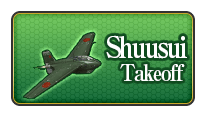
<style>
.page{position:relative;width:206px;height:117px;background:#ffffff}
.page>*{position:absolute;margin:0}
.t1{font:30px/30px "RyuminPro-ExBold";letter-spacing:-0.1em;color:#ffffff;scale:0.9 1}
.t2{font:22px/30px "RyuminPro-ExBold";letter-spacing:-0.1em;color:#ffffff;scale:0.9 1}
</style>
<div class="page">
<p class="t1" style="left:106px;top:35px;width:81px;height:46px">Shuusui<br><span class="t2">   Takeoff</span></p>
</div>
